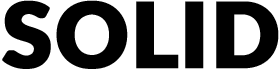
<style>
.page{position:relative;width:280px;height:70px;background:#000000}
.page>*{position:absolute;margin:0}
.t1{font:90px "Lato-Black";color:#000000;font-weight:bold}
</style>
<div class="page">
<p class="t1" style="left:2px;top:0px;width:277px;height:69px">SOLID</p>
</div>
